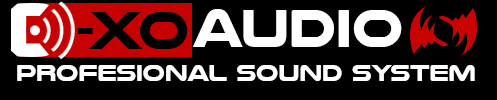
<style>
.page{position:relative;width:497px;height:100px;background:#000000}
.page>*{position:absolute;margin:0}
.t1{font:55px "NulshockRg-Bold";color:#000000}
.t2{font:55px "NulshockRg-Bold";color:#ffffff}
.t3{font:24px "NulshockRg-Bold";color:#ffffff}
</style>
<div class="page">
<p class="t1" style="left:77px;top:12px;width:111px;height:37px">-XO</p>
<p class="t2" style="left:193px;top:9px;width:209px;height:38px">AUDIO</p>
<p class="t3" style="left:17px;top:65px;width:458px;height:16px">profesional Sound System</p>
</div>
